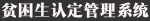
<style>
.page{position:relative;width:150px;height:21px;background:#333333}
.page>*{position:absolute;margin:0}
.t1{font:16px "RTWSShangYaDemo-Regular";color:#fdf5f5;font-weight:bold}
</style>
<div class="page">
<p class="t1" style="left:1px;top:2px;width:148px;height:16px">贫困生认定管理系统</p>
</div>
